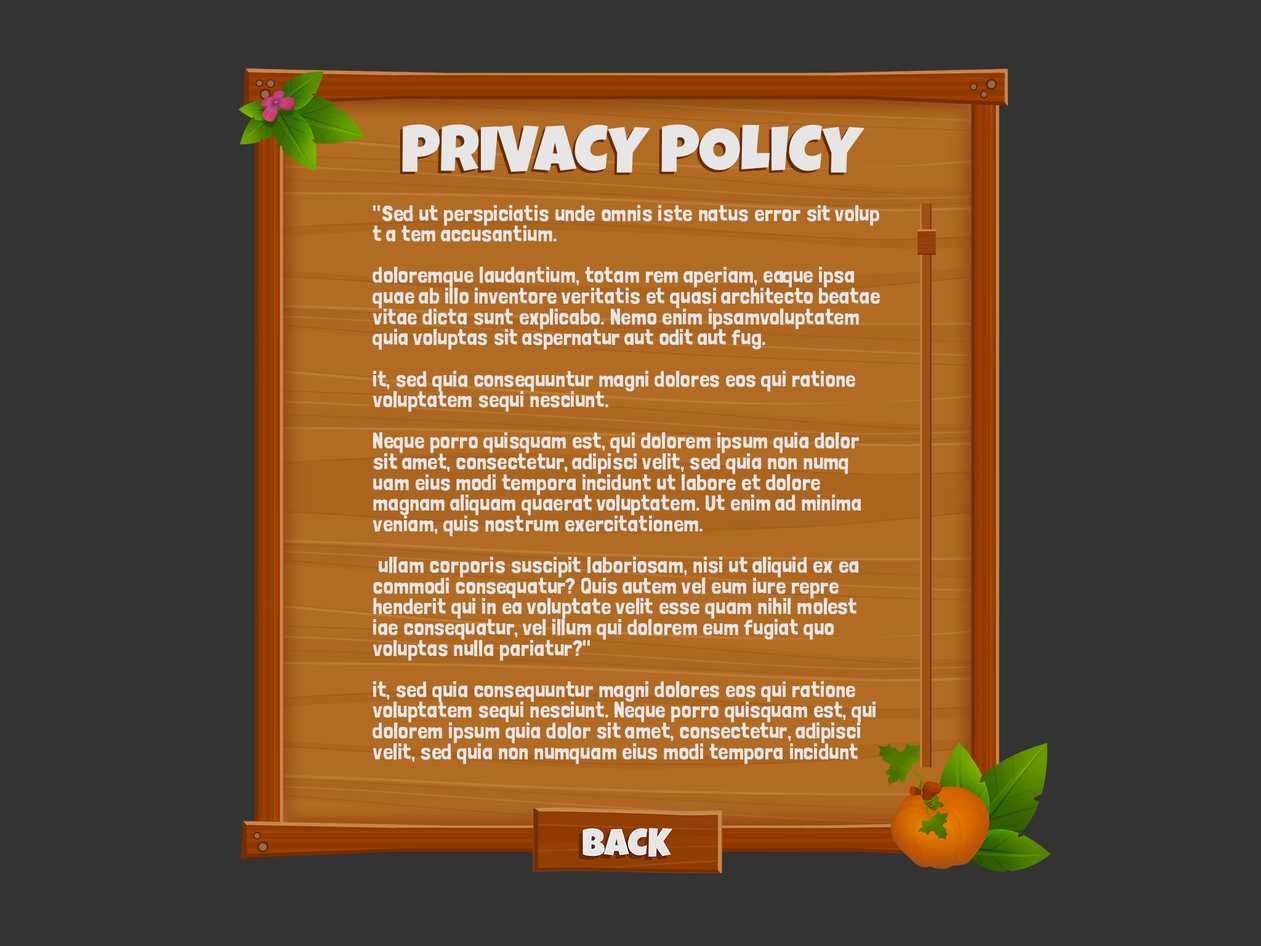
<style>
.page{position:relative;width:1261px;height:946px;background:#333333}
.page>*{position:absolute;margin:0}
.t1{font:22.3px/20.7px "LondrinaSolid-Regular";color:#e6e6e6}
</style>
<div class="page">
<p class="t1" style="left:372px;top:205px;width:508px;height:559px">"Sed ut perspiciatis unde omnis iste natus error sit volup t a tem accusantium. <br><br>doloremque laudantium, totam rem aperiam, eaque ipsa quae ab illo inventore veritatis et quasi architecto beatae vitae dicta sunt explicabo. Nemo enim ipsamvoluptatem quia voluptas sit aspernatur aut odit aut fug.<br><br>it, sed quia consequuntur magni dolores eos qui ratione voluptatem sequi nesciunt.<br> <br>Neque porro quisquam est, qui dolorem ipsum quia dolor sit amet, consectetur, adipisci velit, sed quia non numq uam eius modi tempora incidunt ut labore et dolore magnam aliquam quaerat voluptatem. Ut enim ad minima veniam, quis nostrum exercitationem.<br><br> ullam corporis suscipit laboriosam, nisi ut aliquid ex ea commodi consequatur? Quis autem vel eum iure repre henderit qui in ea voluptate velit esse quam nihil molest iae consequatur, vel illum qui dolorem eum fugiat quo voluptas nulla pariatur?"<br><br>it, sed quia consequuntur magni dolores eos qui ratione voluptatem sequi nesciunt. Neque porro quisquam est, qui dolorem ipsum quia dolor sit amet, consectetur, adipisci velit, sed quia non numquam eius modi tempora incidunt ut labore et dolore magnam aliquam quaerat voluptatem. Ut enim ad minima veniam, quis nostrum exercitationem.<br><br> ullam corporis suscipit laboriosam, nisi ut aliquid ex ea commodi consequatur? Quis autem vel eum iure reprehenderit qui in ea voluptate velit esse quam nihil molestiae consequatur, vel illum qui dolorem eum fugiat quo voluptas nulla pariatur?"</p>
</div>
